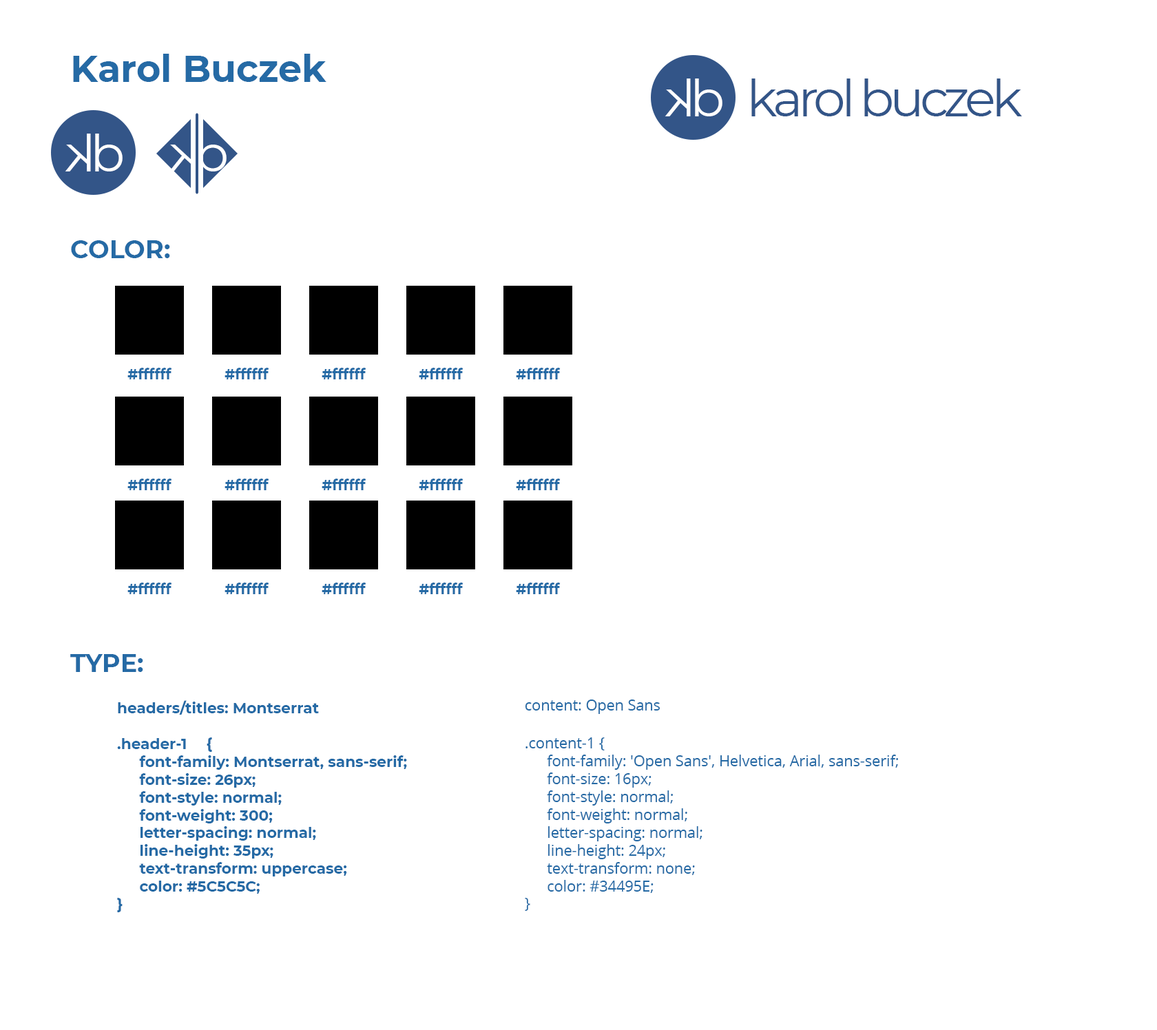
<style>
.page{position:relative;width:1157px;height:1030px;background:#ffffff}
.page>*{position:absolute;margin:0}
.t1{font:37.2px "Montserrat-Bold";color:#256aa5}
.t2{font:51px "Montserrat-Regular";color:#ffffff}
.t3{font:51px "Montserrat-Regular";letter-spacing:-0.085em;color:#335588}
.t4{font:25px "Montserrat-Bold";color:#256aa5}
.t5{font:14.3px "Montserrat-Bold";color:#256aa5}
.t6{font:14.9px "Montserrat-Bold";color:#256aa5}
.t7{font:14.9px "OpenSans-Regular";color:#256aa5}
</style>
<div class="page">
<p class="t1" style="left:73px;top:54px;width:253px;height:28px">Karol Buczek</p>
<p class="t2" style="left:665px;top:79px;width:26px;height:37px;rotate:180deg">k</p>
<p class="t2" style="left:695px;top:79px;width:28px;height:37px">b</p>
<p class="t3" style="left:751px;top:79px;width:271px;height:37px">karol buczek</p>
<p class="t2" style="left:65px;top:134px;width:26px;height:38px;rotate:180deg">k</p>
<p class="t2" style="left:95px;top:134px;width:28px;height:38px">b</p>
<p class="t2" style="left:169px;top:134px;width:26px;height:38px;rotate:180deg">k</p>
<p class="t2" style="left:199px;top:134px;width:28px;height:38px">b</p>
<p class="t4" style="left:71px;top:240px;width:99px;height:18px">COLOR:</p>
<p class="t5" style="left:127px;top:368px;width:45px;height:12px">#ffffff</p>
<p class="t5" style="left:225px;top:368px;width:44px;height:12px">#ffffff</p>
<p class="t5" style="left:322px;top:368px;width:44px;height:12px">#ffffff</p>
<p class="t5" style="left:419px;top:368px;width:45px;height:12px">#ffffff</p>
<p class="t5" style="left:516px;top:368px;width:45px;height:12px">#ffffff</p>
<p class="t5" style="left:127px;top:479px;width:45px;height:11px">#ffffff</p>
<p class="t5" style="left:225px;top:479px;width:44px;height:11px">#ffffff</p>
<p class="t5" style="left:322px;top:479px;width:44px;height:11px">#ffffff</p>
<p class="t5" style="left:419px;top:479px;width:45px;height:11px">#ffffff</p>
<p class="t5" style="left:516px;top:479px;width:45px;height:11px">#ffffff</p>
<p class="t5" style="left:127px;top:583px;width:45px;height:11px">#ffffff</p>
<p class="t5" style="left:225px;top:583px;width:44px;height:11px">#ffffff</p>
<p class="t5" style="left:322px;top:583px;width:44px;height:11px">#ffffff</p>
<p class="t5" style="left:419px;top:583px;width:45px;height:11px">#ffffff</p>
<p class="t5" style="left:516px;top:583px;width:45px;height:11px">#ffffff</p>
<p class="t4" style="left:70px;top:654px;width:73px;height:18px">TYPE:</p>
<p class="t6" style="left:118px;top:701px;width:201px;height:14px">headers/titles: Montserrat</p>
<p class="t7" style="left:525px;top:700px;width:136px;height:14px">content: Open Sans</p>
<p class="t6" style="left:117px;top:738px;width:290px;height:175px">.header-1 {<br> font-family: Montserrat, sans-serif;<br> font-size: 26px;<br> font-style: normal;<br> font-weight: 300;<br> letter-spacing: normal;<br> line-height: 35px;<br> text-transform: uppercase;<br> color: #5C5C5C;<br>}</p>
<p class="t7" style="left:525px;top:738px;width:373px;height:173px">.content-1 {<br> font-family: 'Open Sans', Helvetica, Arial, sans-serif;<br> font-size: 16px;<br> font-style: normal;<br> font-weight: normal;<br> letter-spacing: normal;<br> line-height: 24px;<br> text-transform: none;<br> color: #34495E;<br>}</p>
</div>
